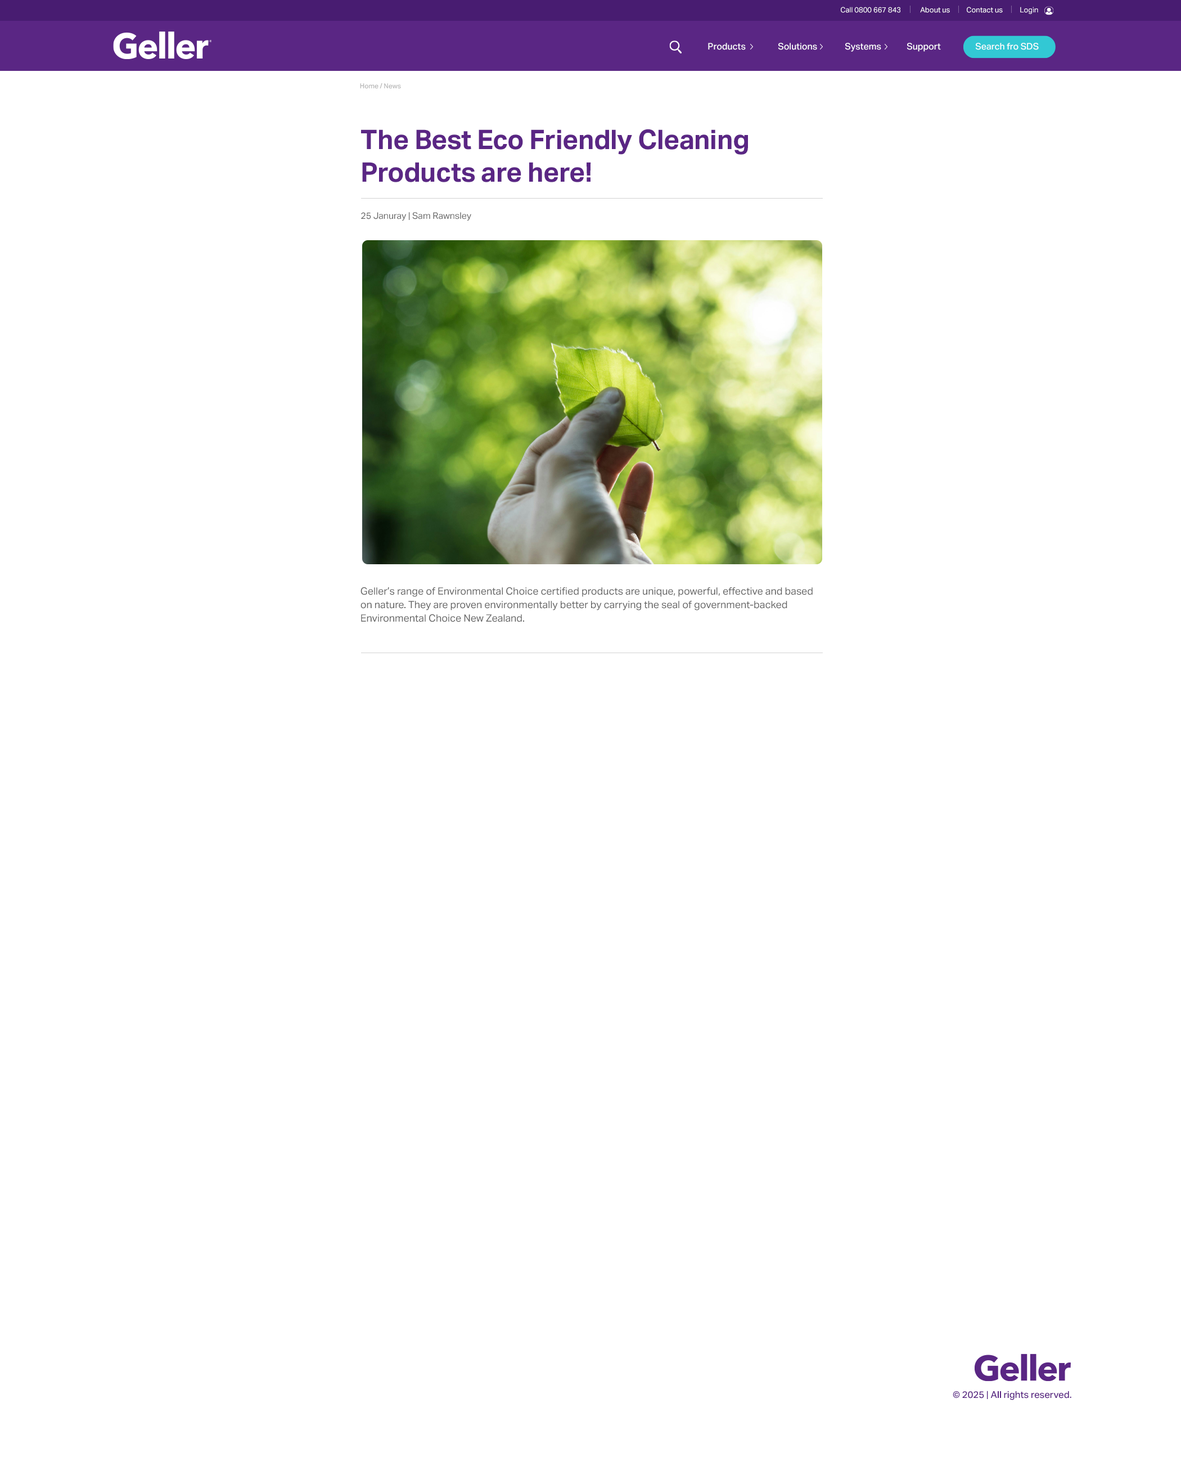
<style>
.page{position:relative;width:1181px;height:1484px;background:#ffffff}
.page>*{position:absolute;margin:0}
.t1{font:7.3px "AktivGrotesk-Regular";color:#fefefe}
.t2{font:9px "AktivGrotesk-Medium";color:#fefefe}
.t3{font:6.8px "AktivGrotesk-Medium";color:#b4b4b4}
.t4{font:27px "AktivGrotesk-Bold";letter-spacing:-0.01em;color:#5a2684}
.t5{font:9px "AktivGrotesk-Regular";color:#646464}
.t6{font:10.1px/13.5px "AktivGrotesk-Regular";color:#646464}
.t7{font:9.4px "AktivGrotesk-Medium";color:#5a2684}
</style>
<div class="page">
<p class="t1" style="left:841px;top:7px;width:60px;height:6px">Call 0800 667 843</p>
<p class="t1" style="left:920px;top:7px;width:30px;height:6px">About us</p>
<p class="t1" style="left:967px;top:7px;width:36px;height:6px">Contact us</p>
<p class="t1" style="left:1020px;top:7px;width:18px;height:7px">Login</p>
<p class="t2" style="left:708px;top:43px;width:38px;height:7px">Products</p>
<p class="t2" style="left:778px;top:43px;width:39px;height:7px">Solutions</p>
<p class="t2" style="left:845px;top:43px;width:36px;height:9px">Systems</p>
<p class="t2" style="left:907px;top:43px;width:34px;height:9px">Support</p>
<p class="t2" style="left:975px;top:43px;width:64px;height:7px">Search fro SDS</p>
<p class="t3" style="left:360px;top:83px;width:41px;height:6px">Home / News</p>
<p class="t4" style="left:361px;top:129px;width:387px;height:53px">The Best Eco Friendly Cleaning Products are here!</p>
<p class="t5" style="left:361px;top:212px;width:110px;height:8px">25 Januray | Sam Rawnsley</p>
<p class="t6" style="left:361px;top:587px;width:452px;height:35px">Geller’s range of Environmental Choice certified products are unique, powerful, effective and based on nature. They are proven environmentally better by carrying the seal of government-backed Environmental Choice New Zealand.</p>
<p class="t7" style="left:953px;top:1390px;width:119px;height:10px">© 2025 | All rights reserved.</p>
</div>
